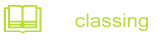
<style>
.page{position:relative;width:160px;height:40px;background:#ffffff}
.page>*{position:absolute;margin:0}
.t1{font:18.7px "ArialMT";color:#b8db40;scale:1.11 1}
.t2{font:18.7px "ArialMT";color:#fefefc;scale:1.11 1}
</style>
<div class="page">
<p class="t1" style="left:48px;top:13px;width:100px;height:18px"><span class="t2">Go</span>classing</p>
</div>
